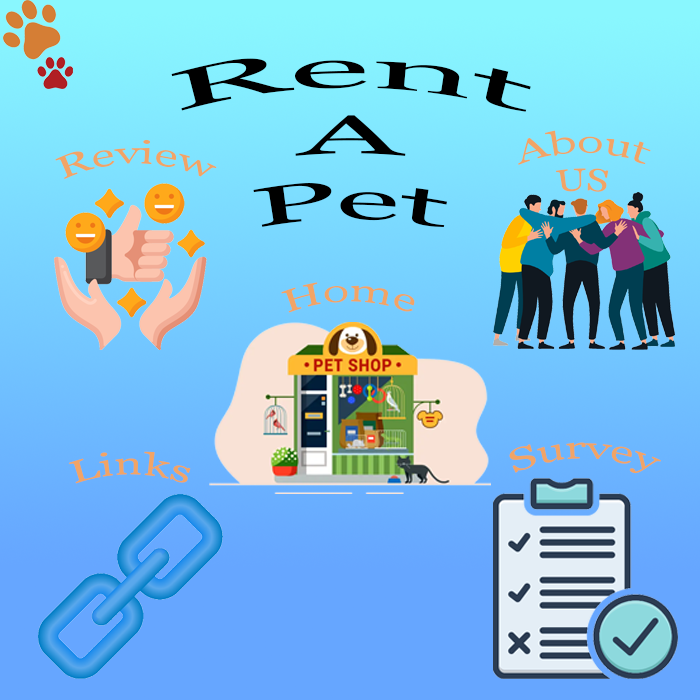
<style>
.page{position:relative;width:700px;height:700px}
.page>*{position:absolute;margin:0}
.t1{font:54.8px "Georgia";color:#000000}
.t2{font:31.6px "Georgia";color:#f1a466}
</style>
<div class="page">
<p class="t1" style="left:171px;top:58px;width:360px;height:169px;text-align:center">Rent<br>A<br>Pet</p>
<p class="t2" style="left:518px;top:130px;width:133px;height:62px;text-align:center">About<br>US</p>
<p class="t2" style="left:55px;top:139px;width:162px;height:41px">Review</p>
<p class="t2" style="left:281px;top:282px;width:134px;height:31px">Home</p>
<p class="t2" style="left:509px;top:442px;width:152px;height:32px">Survey</p>
<p class="t2" style="left:69px;top:451px;width:122px;height:33px">Links</p>
</div>
